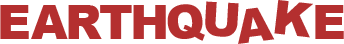
<style>
.page{position:relative;width:344px;height:44px;background:#ffffff}
.page>*{position:absolute;margin:0}
.t1{font:47px "Arial-Black";letter-spacing:0.02em;color:#b42f2f}
</style>
<div class="page">
<p class="t1" style="left:0px;top:5px;width:29px;height:34px">E</p>
<p class="t1" style="left:31px;top:5px;width:37px;height:34px">A</p>
<p class="t1" style="left:68px;top:5px;width:34px;height:34px">R</p>
<p class="t1" style="left:100px;top:5px;width:32px;height:34px">T</p>
<p class="t1" style="left:133px;top:5px;width:33px;height:34px">H</p>
<p class="t1" style="left:167px;top:4px;width:38px;height:37px;rotate:-5deg">Q</p>
<p class="t1" style="left:205px;top:1px;width:34px;height:36px;rotate:3deg">U</p>
<p class="t1" style="left:274px;top:0px;width:39px;height:38px;rotate:6deg">K</p>
<p class="t1" style="left:315px;top:5px;width:29px;height:34px">E</p>
<p class="t1" style="left:238px;top:7px;width:37px;height:37px;rotate:-7deg">A</p>
</div>
